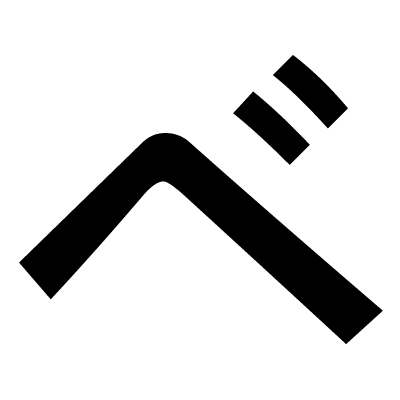
<style>
.page{position:relative;width:400px;height:400px;background:#ffffff}
.page>*{position:absolute;margin:0}
.t1{font:424.8px "MS-PGothic";color:#000000}
</style>
<div class="page">
<p class="t1" style="left:19px;top:55px;width:364px;height:289px">ベ</p>
</div>
